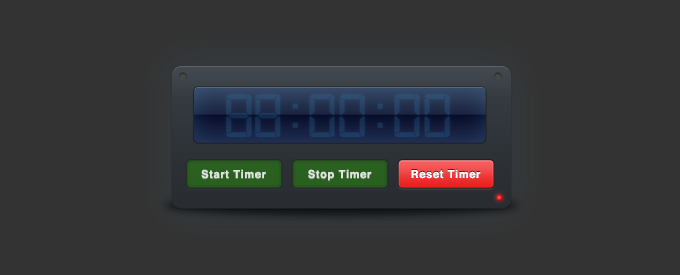
<style>
.page{position:relative;width:680px;height:275px;background:#333333}
.page>*{position:absolute;margin:0}
.t1{font:65px "Digital-7Mono";letter-spacing:-0.01em;color:#1f3c61}
.t2{font:65px "Digital-7";letter-spacing:-0.15em;color:#1f3c61}
.t3{font:65px "Digital-7";letter-spacing:-0.01em;color:#1f3c61}
.t4{font:11px "Helvetica-Bold";letter-spacing:0.06em;color:#e0e5df}
.t5{font:11px "Helvetica-Bold";letter-spacing:0.06em;color:#ffffff}
</style>
<div class="page">
<p class="t1" style="left:226px;top:94px;width:224px;height:43px">88<span class="t2"> :  </span><span class="t3">00</span><span class="t2"> :  </span><span class="t3">00</span></p>
<p class="t4" style="left:201px;top:169px;width:65px;height:10px">Start Timer</p>
<p class="t4" style="left:308px;top:169px;width:64px;height:12px">Stop Timer</p>
<p class="t5" style="left:411px;top:169px;width:70px;height:10px">Reset Timer</p>
</div>
